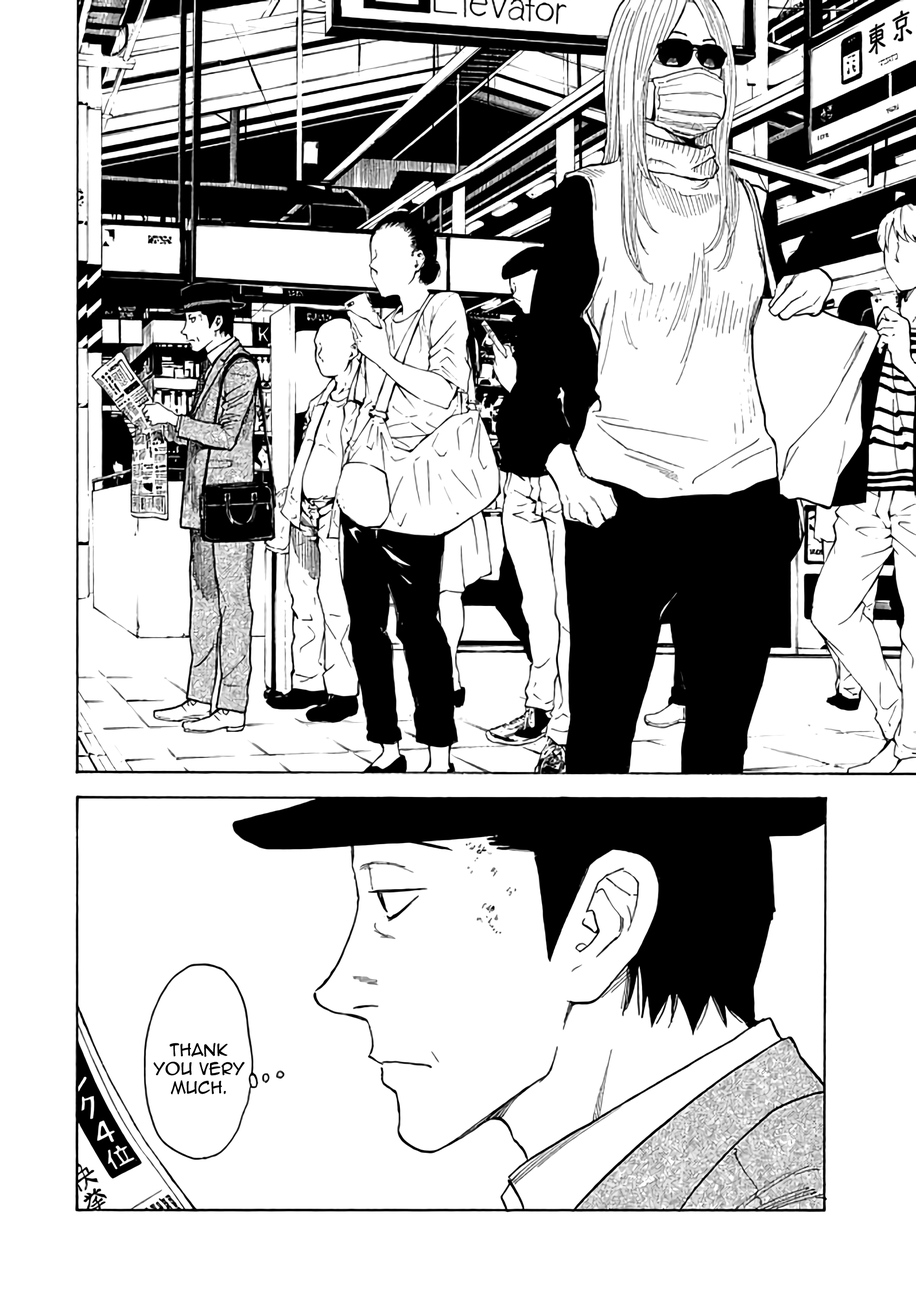
<style>
.page{position:relative;width:916px;height:1302px;background:#ffffff}
.page>*{position:absolute;margin:0}
.t1{font:15.7px "AnimeAce2.0BB";color:#000000}
</style>
<div class="page">
<p class="t1" style="left:154px;top:1043px;width:91px;height:52px;text-align:center">Thank you very much.</p>
</div>
